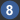
<style>
.page{position:relative;width:20px;height:20px;background:#3b5f97}
.page>*{position:absolute;margin:0}
.t1{font:14px "Arial-BoldMT";letter-spacing:0.025em;color:#fcfdfd}
</style>
<div class="page">
<p class="t1" style="left:6px;top:5px;width:7px;height:11px">8</p>
</div>
